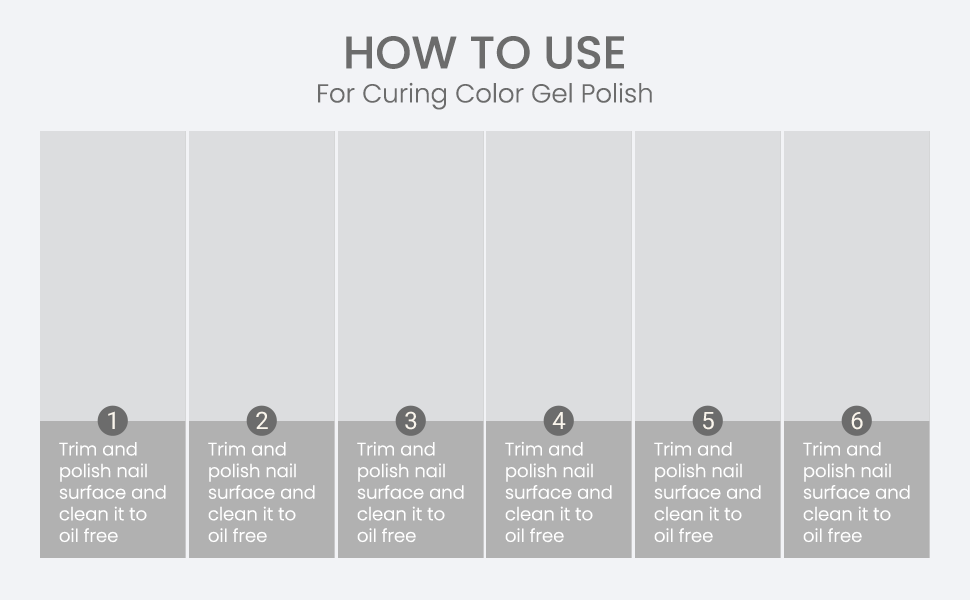
<style>
.page{position:relative;width:970px;height:600px;background:#dcdddf}
.page>*{position:absolute;margin:0}
.t1{font:46px "Poppins-Medium";color:#6c6c6c;text-transform:uppercase}
.t2{font:26px "Poppins-Light";color:#6c6c6c}
.t3{font:24px "Roboto-Regular";color:#faf5ec}
.t4{font:18px "Poppins-Light";color:#ffffff}
</style>
<div class="page">
<p class="t1" style="left:346px;top:36px;width:278px;height:33px">How to Use</p>
<p class="t2" style="left:318px;top:82px;width:334px;height:28px">For Curing Color Gel Polish</p>
<p class="t3" style="left:108px;top:411px;width:7px;height:18px">1</p>
<p class="t3" style="left:256px;top:411px;width:12px;height:18px">2</p>
<p class="t3" style="left:405px;top:411px;width:12px;height:19px">3</p>
<p class="t3" style="left:552px;top:412px;width:14px;height:17px">4</p>
<p class="t3" style="left:703px;top:412px;width:11px;height:18px">5</p>
<p class="t3" style="left:851px;top:412px;width:12px;height:18px">6</p>
<p class="t4" style="left:59px;top:441px;width:107px;height:102px">Trim and<br>polish nail<br>surface and<br>clean it to<br>oil free</p>
<p class="t4" style="left:208px;top:441px;width:107px;height:102px">Trim and<br>polish nail<br>surface and<br>clean it to<br>oil free</p>
<p class="t4" style="left:357px;top:441px;width:107px;height:102px">Trim and<br>polish nail<br>surface and<br>clean it to<br>oil free</p>
<p class="t4" style="left:505px;top:441px;width:107px;height:102px">Trim and<br>polish nail<br>surface and<br>clean it to<br>oil free</p>
<p class="t4" style="left:654px;top:441px;width:107px;height:102px">Trim and<br>polish nail<br>surface and<br>clean it to<br>oil free</p>
<p class="t4" style="left:803px;top:441px;width:107px;height:102px">Trim and<br>polish nail<br>surface and<br>clean it to<br>oil free</p>
</div>
